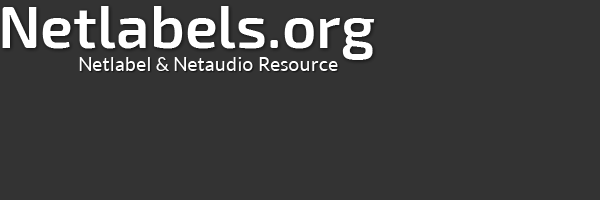
<style>
.page{position:relative;width:600px;height:200px;background:#333333}
.page>*{position:absolute;margin:0}
.t1{font:60px "Exo2-SemiBold";color:#ffffff}
.t2{font:19px "Lato-Regular";letter-spacing:0.01em;color:#ffffff}
</style>
<div class="page">
<p class="t1" style="left:2px;top:6px;width:373px;height:54px">Netlabels.org</p>
<p class="t2" style="left:79px;top:57px;width:259px;height:14px">Netlabel &amp; Netaudio Resource</p>
</div>
